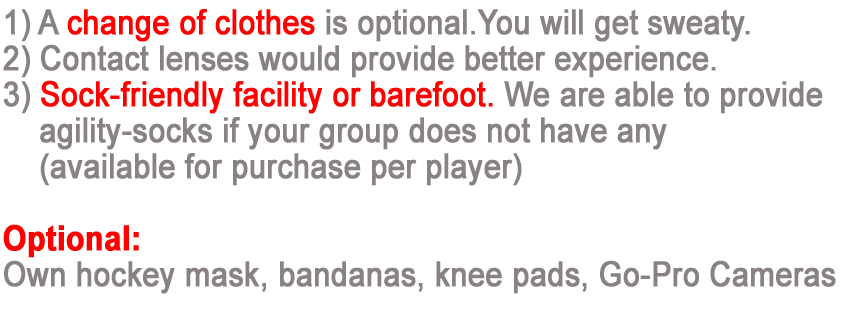
<style>
.page{position:relative;width:847px;height:328px;background:#ffffff}
.page>*{position:absolute;margin:0}
.t1{font:34.5px/36px "ArialMT";color:#888282;font-weight:bold;scale:0.87 1}
.t2{font:34.5px/36px "ArialMT";color:#ff0000;font-weight:bold;scale:0.87 1}
.t3{font:34.5px/36px "Arial-BoldMT";color:#ff0000;font-weight:bold;scale:0.87 1}
</style>
<div class="page">
<p class="t1" style="left:3px;top:9px;width:833px;height:285px">1) A <span class="t2">change of clothes </span>is optional.You will get sweaty.<br>2) Contact lenses would provide better experience.<br>3) <span class="t2">Sock-friendly facility or barefoot. </span>We are able to provide<br>    agility-socks if your group does not have any<br>    (available for purchase per player)<br><br><span class="t3">Optional:<br></span>Own hockey mask, bandanas, knee pads, Go-Pro Cameras</p>
</div>
